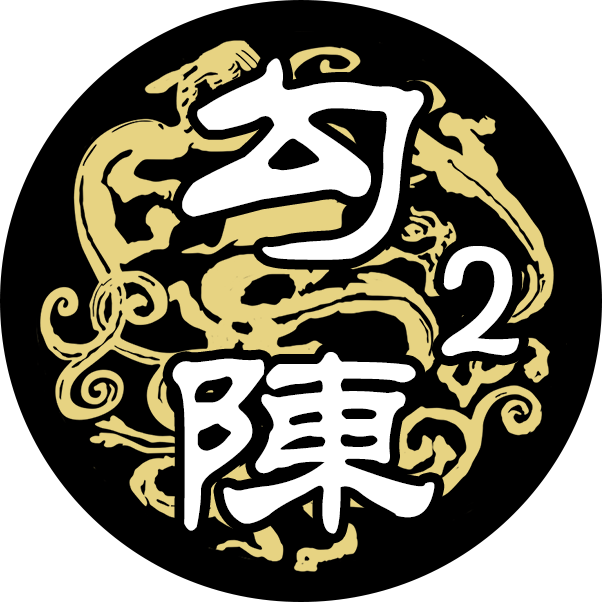
<style>
.page{position:relative;width:602px;height:602px;background:#000000}
.page>*{position:absolute;margin:0}
.t1{font:281.2px "FZL2K--GBK1-0";color:#ffffff}
.t2{font:187.5px "FZL2K--GBK1-0";letter-spacing:-0.1em;color:#ffffff}
</style>
<div class="page">
<p class="t1" style="left:172px;top:58px;width:263px;height:476px">勾陳</p>
<p class="t2" style="left:441px;top:246px;width:78px;height:110px">2</p>
</div>
